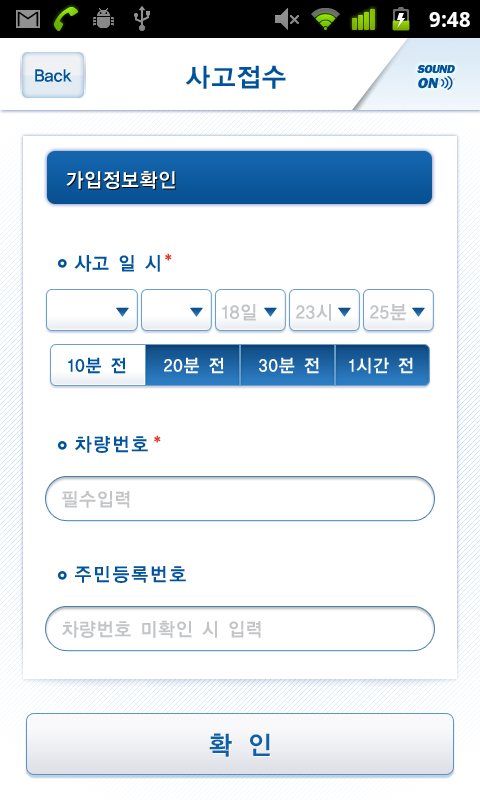
<style>
.page{position:relative;width:480px;height:800px;background:#ffffff}
.page>*{position:absolute;margin:0}
.t1{font:26px "YDIYGO140-KSCpc-EUC-H";letter-spacing:-0.025em;color:#00529b}
.t2{font:12px/15px "FranklinGothic-Heavy";letter-spacing:-0.05em;color:#00529b;text-transform:uppercase;font-style:italic}
.t3{font:13px/15px "FranklinGothic-Heavy";color:#00529b;text-transform:uppercase;font-style:italic}
.t4{font:15px/15px "FranklinGothic-Heavy";color:#00529b;text-transform:uppercase;font-style:italic}
.t5{font:18px "YDIYGO140-KSCpc-EUC-H";letter-spacing:-0.075em;color:#00529b;scale:0.95 1}
.t6{font:20px "YDIYGO140-KSCpc-EUC-H";letter-spacing:-0.025em;color:#ffffff;scale:0.95 1}
.t7{font:19px "YDIYGO140-KSCpc-EUC-H";letter-spacing:-0.025em;color:#00529b;scale:0.95 1}
.t8{font:18px "YDIYGO140-KSCpc-EUC-H";letter-spacing:-0.2em;color:#e43925;scale:0.95 1}
.t9{font:19px "YDIYGO140-KSCpc-EUC-H";letter-spacing:-0.025em;color:#c1c3c4;scale:0.95 1}
.t10{font:18px "YDIYGO140-KSCpc-EUC-H";letter-spacing:-0.025em;color:#00529b;scale:0.95 1}
.t11{font:18px "YDIYGO140-KSCpc-EUC-H";letter-spacing:-0.025em;color:#fcfdfe;scale:0.95 1}
.t12{font:18px "YDIYGO140-KSCpc-EUC-H";letter-spacing:-0.025em;color:#ffffff;scale:0.95 1}
.t13{font:19px "YDIYGO140-KSCpc-EUC-H";letter-spacing:0.05em;color:#00529b;scale:0.95 1}
.t14{font:26px "YDIYGO140-KSCpc-EUC-H";letter-spacing:0.05em;color:#115fa5;scale:0.95 1}
</style>
<div class="page">
<p class="t1" style="left:185px;top:65px;width:101px;height:24px">사고접수</p>
<p class="t2" style="left:417px;top:65px;width:38px;height:24px">sound<br><span class="t3">oFF</span></p>
<p class="t2" style="left:417px;top:65px;width:38px;height:24px">sound<br><span class="t4">on</span></p>
<p class="t5" style="left:35px;top:69px;width:37px;height:13px">Back</p>
<p class="t6" style="left:66px;top:171px;width:109px;height:18px">가입정보확인</p>
<p class="t7" style="left:74px;top:255px;width:86px;height:17px">사고 일 시</p>
<p class="t8" style="left:165px;top:253px;width:7px;height:8px">*</p>
<p class="t9" style="left:222px;top:304px;width:34px;height:17px">18일</p>
<p class="t9" style="left:296px;top:304px;width:35px;height:17px">23시</p>
<p class="t9" style="left:370px;top:304px;width:37px;height:17px">25분</p>
<p class="t10" style="left:68px;top:357px;width:58px;height:17px">10분 전</p>
<p class="t11" style="left:164px;top:357px;width:60px;height:17px">20분 전</p>
<p class="t12" style="left:164px;top:357px;width:60px;height:17px">20분 전</p>
<p class="t11" style="left:259px;top:357px;width:60px;height:17px">30분 전</p>
<p class="t12" style="left:259px;top:357px;width:60px;height:17px">30분 전</p>
<p class="t11" style="left:349px;top:357px;width:64px;height:17px">1시간 전</p>
<p class="t12" style="left:349px;top:357px;width:64px;height:17px">1시간 전</p>
<p class="t13" style="left:75px;top:436px;width:73px;height:17px">차량번호</p>
<p class="t8" style="left:154px;top:435px;width:7px;height:8px">*</p>
<p class="t9" style="left:62px;top:491px;width:68px;height:17px">필수입력</p>
<p class="t13" style="left:75px;top:566px;width:111px;height:17px">주민등록번호</p>
<p class="t9" style="left:62px;top:620px;width:199px;height:18px">차량번호 미확인 시 입력</p>
<p class="t14" style="left:209px;top:733px;width:61px;height:24px">확 인</p>
</div>
